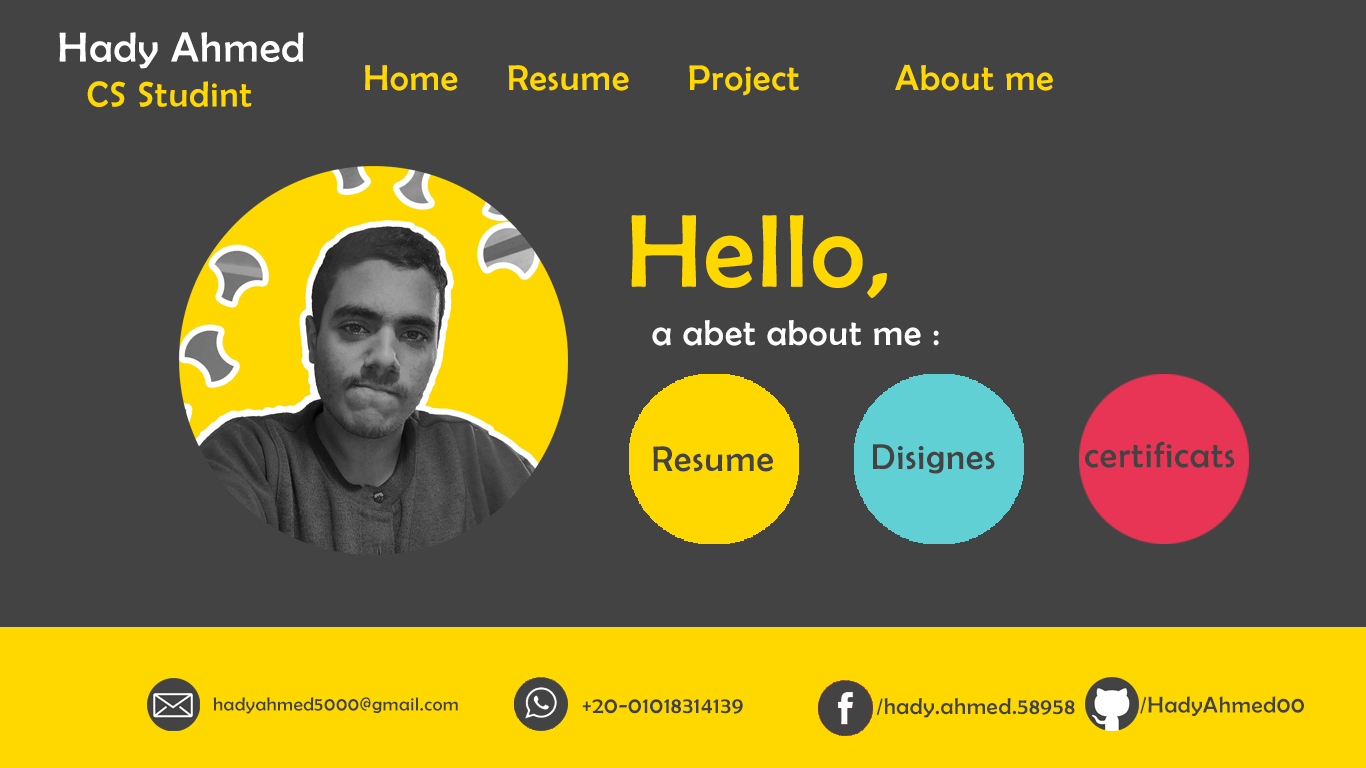
<style>
.page{position:relative;width:1366px;height:768px;background:#434343}
.page>*{position:absolute;margin:0}
.t1{font:42px "BerlinSansFB-Reg";letter-spacing:0.03em;color:#fffefe}
.t2{font:36px "BerlinSansFB-Reg";letter-spacing:0.03em;color:#ffd800}
.t3{font:104px "BerlinSansFB-Reg";letter-spacing:0.03em;color:#ffd800}
.t4{font:36px "BerlinSansFB-Reg";letter-spacing:0.03em;color:#fffefe}
.t5{font:36px "BerlinSansFB-Reg";letter-spacing:0.03em;color:#434343}
.t6{font:19px "BerlinSansFB-Reg";letter-spacing:0.03em;color:#434343}
.t7{font:23px "BerlinSansFB-Reg";letter-spacing:0.03em;color:#434343}
</style>
<div class="page">
<p class="t1" style="left:59px;top:32px;width:245px;height:37px">Hady Ahmed</p>
<p class="t2" style="left:365px;top:65px;width:93px;height:26px">Home</p>
<p class="t2" style="left:508px;top:65px;width:121px;height:26px">Resume</p>
<p class="t2" style="left:689px;top:65px;width:110px;height:31px">Project</p>
<p class="t2" style="left:895px;top:64px;width:158px;height:27px">About me</p>
<p class="t2" style="left:87px;top:81px;width:165px;height:26px">CS Studint</p>
<p class="t3" style="left:631px;top:215px;width:256px;height:83px">HeIlo,</p>
<p class="t4" style="left:652px;top:320px;width:287px;height:26px">a abet about me :</p>
<p class="t5" style="left:653px;top:446px;width:120px;height:26px">Resume</p>
<p class="t5" style="left:873px;top:444px;width:122px;height:30px">Disignes</p>
<p class="t5" style="left:1085px;top:441px;width:150px;height:27px">certificats</p>
<p class="t6" style="left:213px;top:697px;width:245px;height:17px">hadyahmed5000@gmail.com</p>
<p class="t7" style="left:582px;top:699px;width:161px;height:15px">+20-01018314139</p>
<p class="t7" style="left:876px;top:698px;width:199px;height:20px">/hady.ahmed.58958</p>
<p class="t7" style="left:1140px;top:696px;width:164px;height:20px">/HadyAhmed00</p>
</div>
